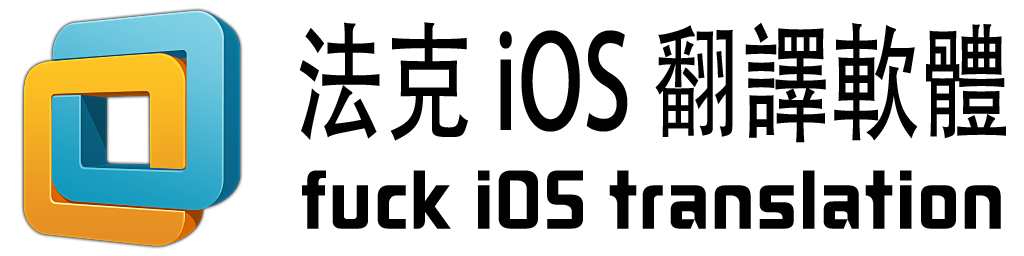
<style>
.page{position:relative;width:1024px;height:256px;background:#ffffff}
.page>*{position:absolute;margin:0}
.t1{font:128px "AdobeHeitiStd-Regular";color:#010101;scale:0.7 1}
.t2{font:72px "FZHZGBJW--GB1-0";letter-spacing:0.025em;color:#010101}
</style>
<div class="page">
<p class="t1" style="left:299px;top:22px;width:707px;height:121px">法克 iOS 翻譯軟體</p>
<p class="t2" style="left:302px;top:170px;width:699px;height:59px">fuck iOS translation</p>
</div>
